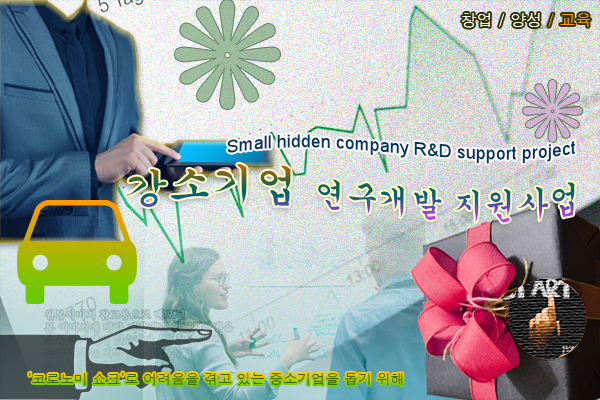
<style>
.page{position:relative;width:600px;height:400px}
.page>*{position:absolute;margin:0}
.t1{font:16px "Dotum";color:#ffffff}
.t2{font:16px "Dotum";color:#ff9900}
.t3{font:18px "ArialMT";color:#003366}
.t4{font:32px "Gungsuh"}
.t5{font:44px "Gungsuh"}
.t6{font:14px "Dotum";color:#336600}
</style>
<div class="page">
<p class="t1" style="left:461px;top:13px;width:130px;height:15px">창업 / 양성 <span class="t2">/ 교육</span></p>
<p class="t3" style="left:227px;top:134px;width:348px;height:30px">Small hidden company R&amp;D support project</p>
<p class="t4" style="left:126px;top:163px;width:449px;height:60px"><span class="t5">강소기업 </span>연구개발 지원사업</p>
<p class="t6" style="left:29px;top:372px;width:374px;height:14px">‘코로노미 쇼크’로 어려움을 겪고 있는 중소기업을 돕기 위해</p>
</div>
